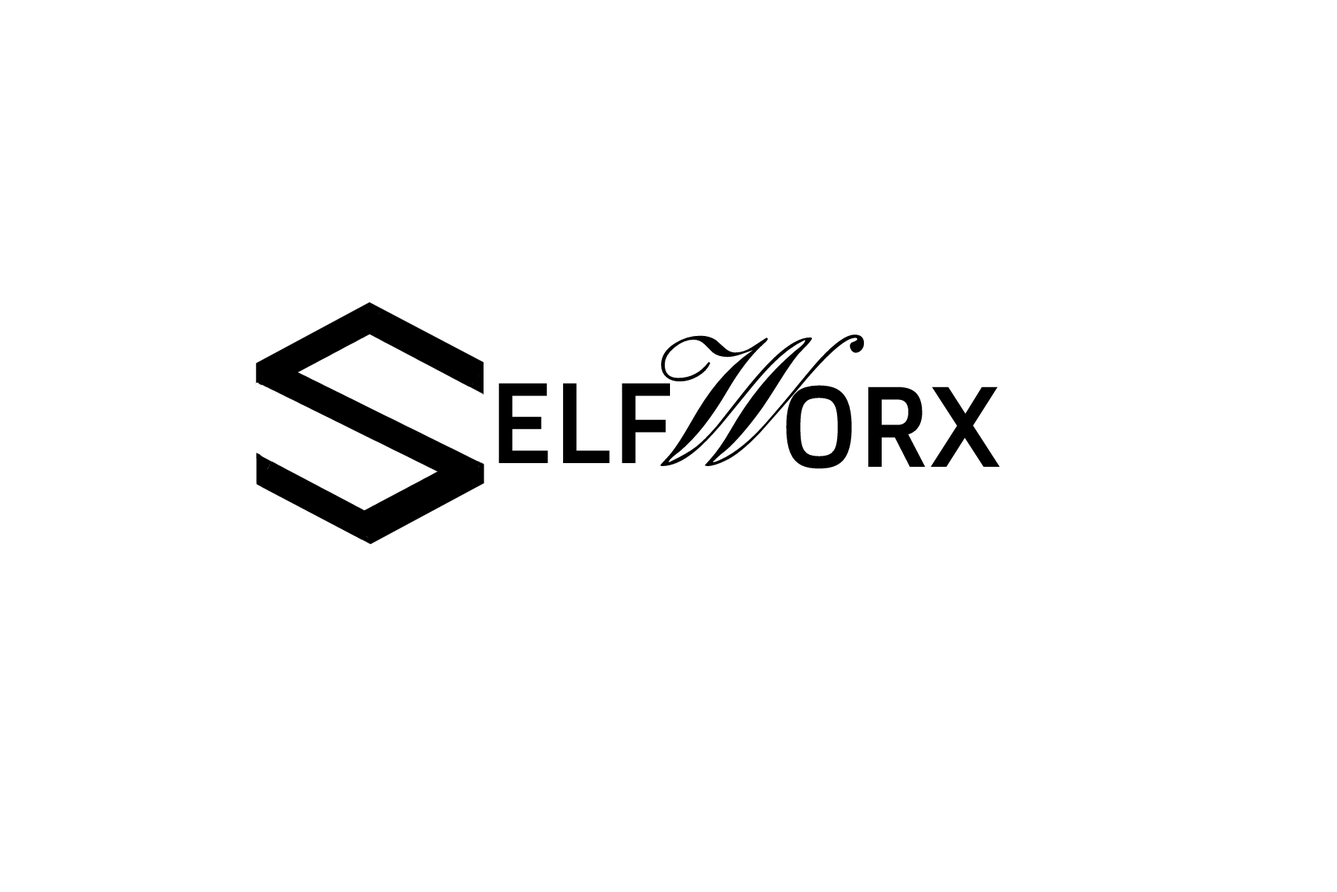
<style>
.page{position:relative;width:1337px;height:892px;background:#ffffff}
.page>*{position:absolute;margin:0}
.t1{font:114.4px "DoppioOne-Regular";color:#000000}
.t2{font:188.7px "EnglandHandDB";color:#000000}
</style>
<div class="page">
<p class="t1" style="left:661px;top:334px;width:339px;height:135px"><span class="t2">W</span>ORX</p>
<p class="t1" style="left:499px;top:383px;width:172px;height:80px">ELF</p>
</div>
